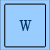
<style>
.page{position:relative;width:50px;height:50px;background:#99ccff}
.page>*{position:absolute;margin:0}
.t1{font:16px "SimSun";color:#003366;scale:1.5 1}
</style>
<div class="page">
<p class="t1" style="left:19px;top:20px;width:13px;height:11px">W</p>
</div>
